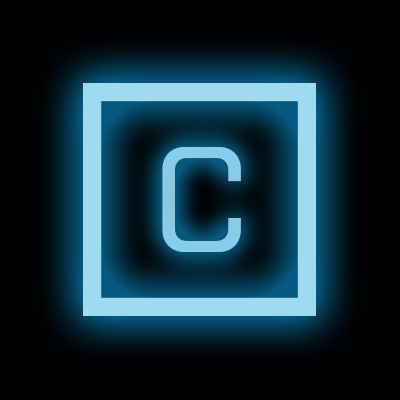
<style>
.page{position:relative;width:400px;height:400px;background:#000000}
.page>*{position:absolute;margin:0}
.t1{font:150px "Purista";color:#80d1f5}
</style>
<div class="page">
<p class="t1" style="left:162px;top:147px;width:79px;height:105px">C</p>
</div>
